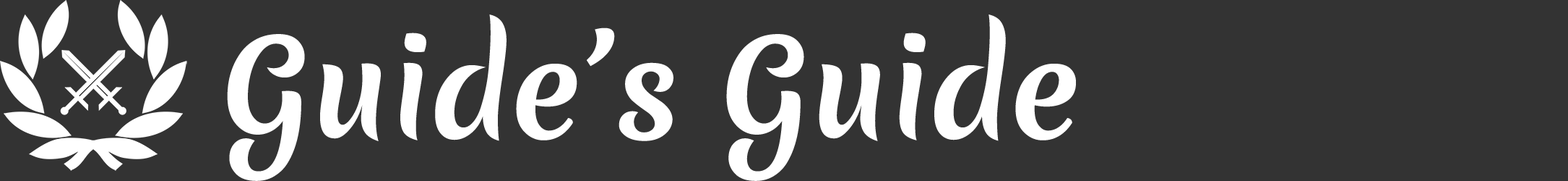
<style>
.page{position:relative;width:1568px;height:181px;background:#333333}
.page>*{position:absolute;margin:0}
.t1{font:129px "MeriendaOne-Regular";color:#ffffff}
</style>
<div class="page">
<p class="t1" style="left:227px;top:14px;width:849px;height:167px">Guide’s Guide</p>
</div>
